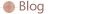
<style>
.page{position:relative;width:103px;height:14px;background:#ffffff}
.page>*{position:absolute;margin:0}
.t1{font:12px "MicrosoftYaHei";color:#9d7065}
</style>
<div class="page">
<p class="t1" style="left:19px;top:0px;width:25px;height:14px">Blog</p>
</div>
